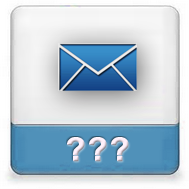
<style>
.page{position:relative;width:189px;height:189px}
.page>*{position:absolute;margin:0}
.t1{font:32px "Arial-BoldMT";letter-spacing:0.05em;color:#feeffa;font-weight:bold}
</style>
<div class="page">
<p class="t1" style="left:67px;top:137px;width:62px;height:25px">???</p>
</div>
